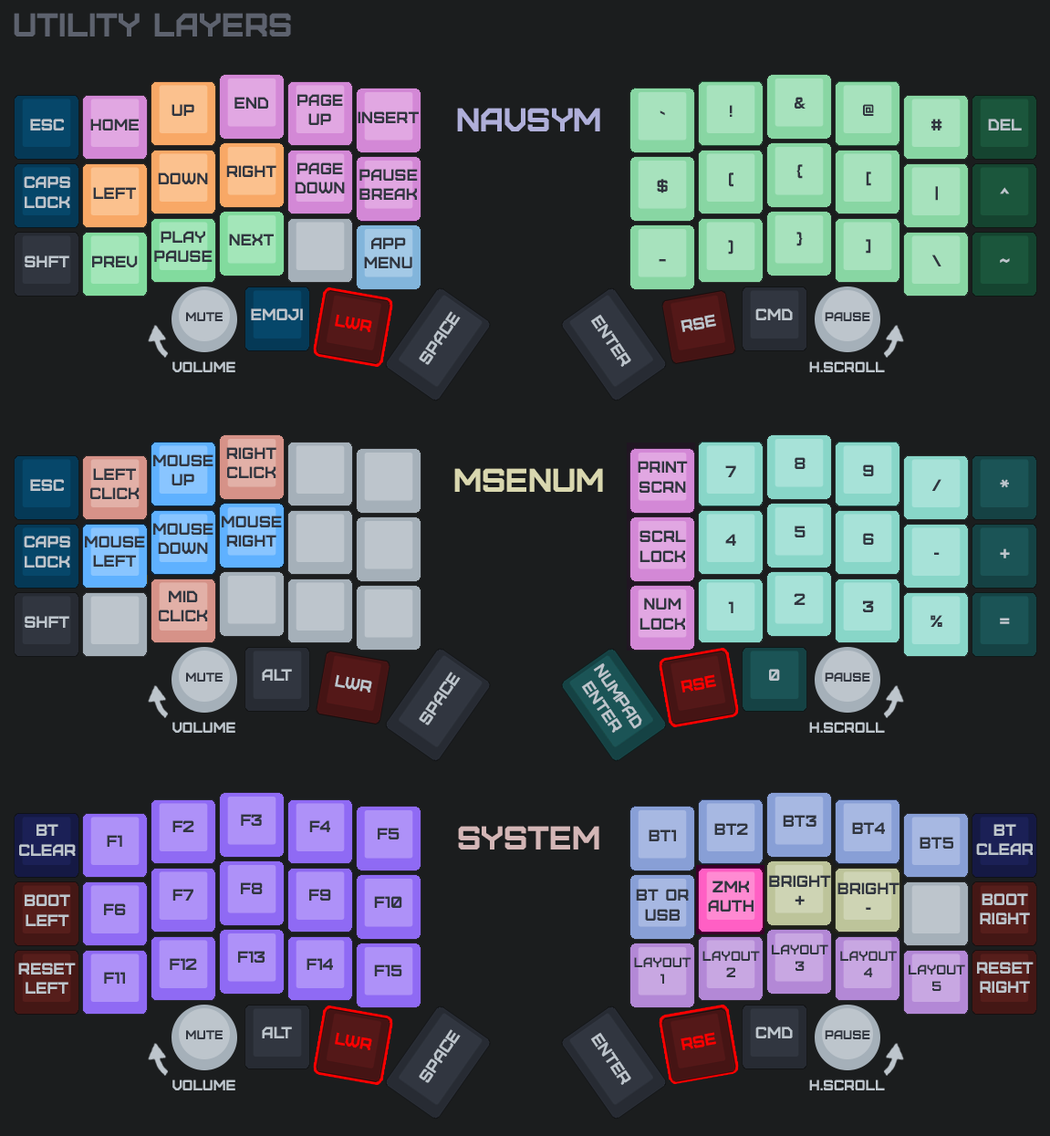
<style>
.page{position:relative;width:1050px;height:1136px;background:#1b1d1e}
.page>*{position:absolute;margin:0}
.t1{font:32.8px "Furore";color:#5d626e}
.t2{font:16.4px "Furore";color:#313640}
.t3{font:32.8px "Furore";color:#afafd9}
.t4{font:16.4px "Furore";color:#bdc5cc}
.t5{font:12.8px "Furore";color:#313640}
.t6{font:16.4px "Furore";color:#ff0000}
.t7{font:14.6px "Furore";color:#bdc5cc}
.t8{font:32.8px "Furore";color:#d9d7af}
.t9{font:32.8px "Furore";color:#d3b6b6}
.t10{font:13.7px "Furore";color:#313640}
</style>
<div class="page">
<p class="t1" style="left:14px;top:13px;width:277px;height:23px">UTILITY LAYERS</p>
<p class="t2" style="left:234px;top:97px;width:34px;height:12px">END</p>
<p class="t2" style="left:297px;top:94px;width:46px;height:31px;text-align:center">PAGE<br>UP</p>
<p class="t2" style="left:795px;top:97px;width:10px;height:12px">&amp;</p>
<p class="t2" style="left:171px;top:104px;width:23px;height:12px">UP</p>
<p class="t2" style="left:358px;top:111px;width:61px;height:12px">insert</p>
<p class="t3" style="left:457px;top:108px;width:143px;height:23px">NAVSYM</p>
<p class="t2" style="left:660px;top:110px;width:5px;height:6px">`</p>
<p class="t2" style="left:730px;top:105px;width:3px;height:12px">!</p>
<p class="t2" style="left:863px;top:104px;width:11px;height:12px">@</p>
<p class="t4" style="left:30px;top:119px;width:34px;height:11px">ESC</p>
<p class="t2" style="left:90px;top:119px;width:49px;height:11px">home</p>
<p class="t2" style="left:931px;top:119px;width:11px;height:11px">#</p>
<p class="t4" style="left:988px;top:119px;width:34px;height:11px">del</p>
<p class="t2" style="left:158px;top:172px;width:50px;height:12px">DOWN</p>
<p class="t2" style="left:226px;top:165px;width:50px;height:12px">RIGHT</p>
<p class="t2" style="left:295px;top:162px;width:50px;height:31px;text-align:center">PAGE<br>DOWN</p>
<p class="t2" style="left:359px;top:169px;width:59px;height:31px;text-align:center">PAUSE<br>BREAK</p>
<p class="t2" style="left:729px;top:172px;width:4px;height:15px">(</p>
<p class="t2" style="left:796px;top:164px;width:7px;height:15px">{</p>
<p class="t2" style="left:866px;top:171px;width:5px;height:15px">[</p>
<p class="t4" style="left:24px;top:176px;width:46px;height:32px;text-align:center">Caps<br>lock</p>
<p class="t2" style="left:657px;top:179px;width:11px;height:14px">$</p>
<p class="t2" style="left:93px;top:187px;width:43px;height:12px">LEFT</p>
<p class="t2" style="left:935px;top:186px;width:3px;height:15px">|</p>
<p class="t4" style="left:1000px;top:187px;width:10px;height:7px">^</p>
<p class="t2" style="left:154px;top:231px;width:59px;height:31px;text-align:center">play<br>pause</p>
<p class="t2" style="left:229px;top:234px;width:45px;height:11px">NEXT</p>
<p class="t2" style="left:796px;top:232px;width:7px;height:14px">}</p>
<p class="t2" style="left:364px;top:237px;width:48px;height:31px;text-align:center">APP<br>MENU</p>
<p class="t2" style="left:728px;top:240px;width:5px;height:15px">)</p>
<p class="t2" style="left:866px;top:239px;width:5px;height:15px">]</p>
<p class="t4" style="left:25px;top:255px;width:44px;height:12px">SHFT</p>
<p class="t2" style="left:92px;top:255px;width:46px;height:12px">prev</p>
<p class="t2" style="left:931px;top:255px;width:10px;height:11px">\</p>
<p class="t2" style="left:659px;top:259px;width:7px;height:3px">_</p>
<p class="t4" style="left:1000px;top:258px;width:10px;height:5px">~</p>
<p class="t5" style="left:186px;top:312px;width:37px;height:9px">MUTE</p>
<p class="t4" style="left:251px;top:308px;width:52px;height:12px">EMOJI</p>
<p class="t6" style="left:335px;top:314px;width:37px;height:18px;rotate:10deg">LWR</p>
<p class="t4" style="left:419px;top:311px;width:42px;height:54px;rotate:-56deg">SPACE</p>
<p class="t4" style="left:590px;top:314px;width:41px;height:53px;rotate:56deg">ENTER</p>
<p class="t4" style="left:681px;top:314px;width:35px;height:18px;rotate:-10deg">RSE</p>
<p class="t4" style="left:755px;top:308px;width:38px;height:12px">CMD</p>
<p class="t5" style="left:825px;top:312px;width:45px;height:9px">PAUSE</p>
<p class="t7" style="left:172px;top:361px;width:63px;height:11px">VOLUME</p>
<p class="t7" style="left:809px;top:361px;width:76px;height:11px">H.SCROLL</p>
<p class="t2" style="left:226px;top:447px;width:50px;height:31px;text-align:center">RIGHT<br>CLICK</p>
<p class="t2" style="left:153px;top:454px;width:60px;height:31px;text-align:center">mouse<br>up</p>
<p class="t2" style="left:638px;top:461px;width:50px;height:32px;text-align:center">PRINT<br>SCRN</p>
<p class="t2" style="left:795px;top:457px;width:10px;height:12px">8</p>
<p class="t2" style="left:90px;top:468px;width:50px;height:31px;text-align:center">LEFT<br>CLICK</p>
<p class="t8" style="left:454px;top:468px;width:149px;height:24px">MSENUM</p>
<p class="t2" style="left:725px;top:465px;width:11px;height:12px">7</p>
<p class="t2" style="left:863px;top:464px;width:11px;height:12px">9</p>
<p class="t4" style="left:30px;top:479px;width:34px;height:12px">ESC</p>
<p class="t2" style="left:931px;top:479px;width:10px;height:12px">/</p>
<p class="t4" style="left:1000px;top:479px;width:9px;height:9px">*</p>
<p class="t2" style="left:222px;top:515px;width:60px;height:31px;text-align:center">mouse<br>right</p>
<p class="t2" style="left:153px;top:523px;width:60px;height:31px;text-align:center">mouse<br>down</p>
<p class="t2" style="left:639px;top:530px;width:47px;height:32px;text-align:center">SCRL<br>lock</p>
<p class="t2" style="left:725px;top:534px;width:11px;height:12px">4</p>
<p class="t2" style="left:795px;top:525px;width:10px;height:12px">5</p>
<p class="t2" style="left:863px;top:533px;width:11px;height:12px">6</p>
<p class="t4" style="left:24px;top:535px;width:46px;height:32px;text-align:center">caps<br>lock</p>
<p class="t2" style="left:85px;top:535px;width:60px;height:31px;text-align:center">MOUSE<br>left</p>
<p class="t2" style="left:934px;top:552px;width:6px;height:3px">-</p>
<p class="t4" style="left:1000px;top:548px;width:10px;height:10px">+</p>
<p class="t2" style="left:159px;top:590px;width:49px;height:31px;text-align:center">MID<br>CLICK</p>
<p class="t2" style="left:794px;top:593px;width:11px;height:12px">2</p>
<p class="t2" style="left:639px;top:597px;width:46px;height:32px;text-align:center">NUM<br>lock</p>
<p class="t2" style="left:728px;top:601px;width:5px;height:12px">1</p>
<p class="t2" style="left:863px;top:600px;width:11px;height:12px">3</p>
<p class="t4" style="left:25px;top:616px;width:44px;height:12px">SHFT</p>
<p class="t2" style="left:930px;top:615px;width:12px;height:12px">%</p>
<p class="t4" style="left:1000px;top:618px;width:10px;height:6px">=</p>
<p class="t4" style="left:581px;top:662px;width:61px;height:71px;text-align:center;rotate:56deg">numpad<br>ENTER</p>
<p class="t5" style="left:186px;top:672px;width:37px;height:9px">MUTE</p>
<p class="t4" style="left:262px;top:669px;width:30px;height:12px">ALT</p>
<p class="t4" style="left:335px;top:674px;width:37px;height:18px;rotate:10deg">LWR</p>
<p class="t4" style="left:419px;top:671px;width:42px;height:54px;rotate:-56deg">SPACE</p>
<p class="t6" style="left:681px;top:674px;width:35px;height:18px;rotate:-10deg">RSE</p>
<p class="t4" style="left:769px;top:669px;width:11px;height:12px">0</p>
<p class="t5" style="left:825px;top:672px;width:45px;height:9px">PAUSE</p>
<p class="t7" style="left:172px;top:722px;width:63px;height:11px">VOLUME</p>
<p class="t7" style="left:809px;top:722px;width:76px;height:11px">H.SCROLL</p>
<p class="t2" style="left:172px;top:820px;width:22px;height:12px">F2</p>
<p class="t2" style="left:241px;top:814px;width:21px;height:12px">F3</p>
<p class="t2" style="left:309px;top:820px;width:21px;height:12px">F4</p>
<p class="t2" style="left:783px;top:815px;width:33px;height:11px">bt3</p>
<p class="t2" style="left:852px;top:822px;width:33px;height:12px">bt4</p>
<p class="t4" style="left:19px;top:824px;width:57px;height:32px;text-align:center">bt<br>clear</p>
<p class="t2" style="left:378px;top:827px;width:22px;height:12px">F5</p>
<p class="t9" style="left:458px;top:826px;width:141px;height:23px">system</p>
<p class="t2" style="left:649px;top:829px;width:27px;height:12px">bt1</p>
<p class="t2" style="left:714px;top:823px;width:34px;height:12px">bt2</p>
<p class="t4" style="left:976px;top:824px;width:57px;height:31px;text-align:center">bt<br>clear</p>
<p class="t2" style="left:107px;top:835px;width:15px;height:12px">F1</p>
<p class="t2" style="left:920px;top:836px;width:33px;height:12px">bt5</p>
<p class="t2" style="left:708px;top:880px;width:45px;height:31px;text-align:center">zmk<br>AUTH</p>
<p class="t2" style="left:769px;top:875px;width:62px;height:30px;text-align:center">BRIGHT<br>+</p>
<p class="t4" style="left:25px;top:894px;width:45px;height:32px;text-align:center">boot<br>lEFT</p>
<p class="t2" style="left:172px;top:888px;width:21px;height:12px">F7</p>
<p class="t2" style="left:241px;top:882px;width:22px;height:12px">F8</p>
<p class="t2" style="left:309px;top:888px;width:22px;height:12px">F9</p>
<p class="t2" style="left:636px;top:888px;width:53px;height:32px;text-align:center">bt or<br>usb</p>
<p class="t2" style="left:837px;top:882px;width:62px;height:27px;text-align:center">BRIGHT<br>-</p>
<p class="t4" style="left:980px;top:893px;width:50px;height:31px;text-align:center">boot<br>RIGHT</p>
<p class="t2" style="left:104px;top:903px;width:22px;height:12px">F6</p>
<p class="t2" style="left:374px;top:896px;width:28px;height:12px">F10</p>
<p class="t2" style="left:238px;top:951px;width:27px;height:11px">f13</p>
<p class="t10" style="left:702px;top:951px;width:58px;height:26px;text-align:center">LAYOUT<br>2</p>
<p class="t10" style="left:772px;top:944px;width:56px;height:27px;text-align:center">layout<br>3</p>
<p class="t10" style="left:840px;top:951px;width:57px;height:26px;text-align:center">LAYOUT<br>4</p>
<p class="t4" style="left:18px;top:962px;width:58px;height:31px;text-align:center">reset<br>left</p>
<p class="t2" style="left:170px;top:958px;width:27px;height:12px">F12</p>
<p class="t2" style="left:307px;top:958px;width:26px;height:12px">F14</p>
<p class="t2" style="left:374px;top:964px;width:28px;height:12px">F15</p>
<p class="t10" style="left:634px;top:957px;width:57px;height:26px;text-align:center">LAYOUT<br>1</p>
<p class="t10" style="left:909px;top:964px;width:56px;height:27px;text-align:center">LAYOUT<br>5</p>
<p class="t4" style="left:977px;top:961px;width:57px;height:31px;text-align:center">reset<br>right</p>
<p class="t2" style="left:104px;top:972px;width:21px;height:11px">F11</p>
<p class="t5" style="left:186px;top:1030px;width:37px;height:9px">MUTE</p>
<p class="t4" style="left:262px;top:1026px;width:30px;height:12px">ALT</p>
<p class="t6" style="left:335px;top:1032px;width:37px;height:18px;rotate:10deg">LWR</p>
<p class="t4" style="left:419px;top:1029px;width:42px;height:54px;rotate:-56deg">SPACE</p>
<p class="t4" style="left:590px;top:1032px;width:41px;height:53px;rotate:56deg">ENTER</p>
<p class="t6" style="left:681px;top:1032px;width:35px;height:18px;rotate:-10deg">RSE</p>
<p class="t4" style="left:755px;top:1026px;width:38px;height:12px">CMD</p>
<p class="t5" style="left:825px;top:1030px;width:45px;height:9px">PAUSE</p>
<p class="t7" style="left:172px;top:1079px;width:63px;height:11px">VOLUME</p>
<p class="t7" style="left:809px;top:1079px;width:76px;height:11px">H.SCROLL</p>
</div>
